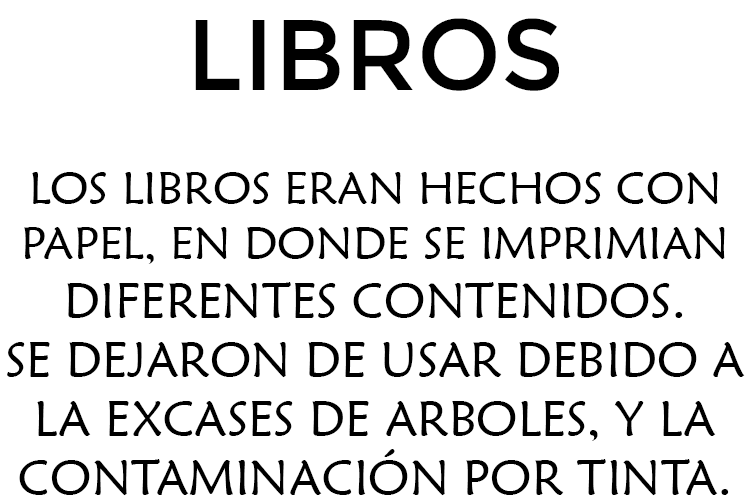
<style>
.page{position:relative;width:750px;height:500px;background:#ffffff}
.page>*{position:absolute;margin:0}
.t1{font:49.2px "MaiandraGD-Regular";color:#000000;text-transform:uppercase}
.t2{font:100px "Montserrat-Regular";color:#000000;text-transform:uppercase}
.t3{font:45.8px "MaiandraGD-Regular";color:#000000;text-transform:uppercase}
</style>
<div class="page">
<p class="t1" style="left:7px;top:18px;width:738px;height:478px;text-align:center"><span class="t2">Libros<br><br></span><span class="t3">los libros eran hechos con papel, en donde se imprimian <br></span>diferentes contenidos.<br>Se dejaron de usar debido a <br>la excases de arboles, y la<br>contaminación por tinta.</p>
</div>
